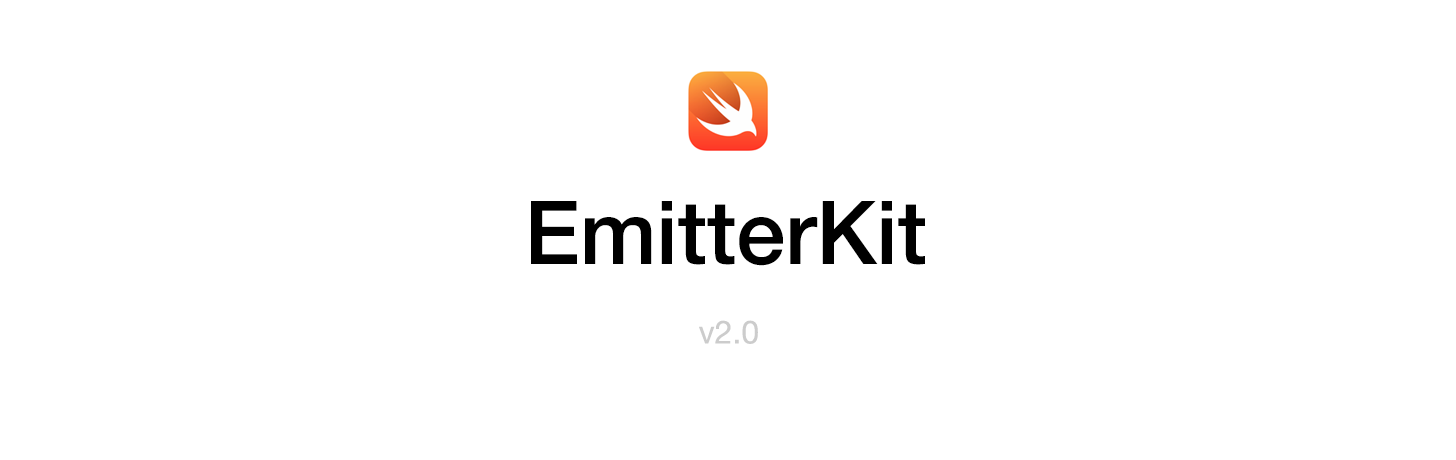
<style>
.page{position:relative;width:1456px;height:460px;background:#ffffff}
.page>*{position:absolute;margin:0}
.t1{font:88px "HelveticaNeue-Medium";color:#000000}
.t2{font:32px "HelveticaNeue";color:#cccccc}
</style>
<div class="page">
<p class="t1" style="left:531px;top:201px;width:394px;height:65px">EmitterKit</p>
<p class="t2" style="left:699px;top:320px;width:59px;height:24px">v2.0</p>
</div>
